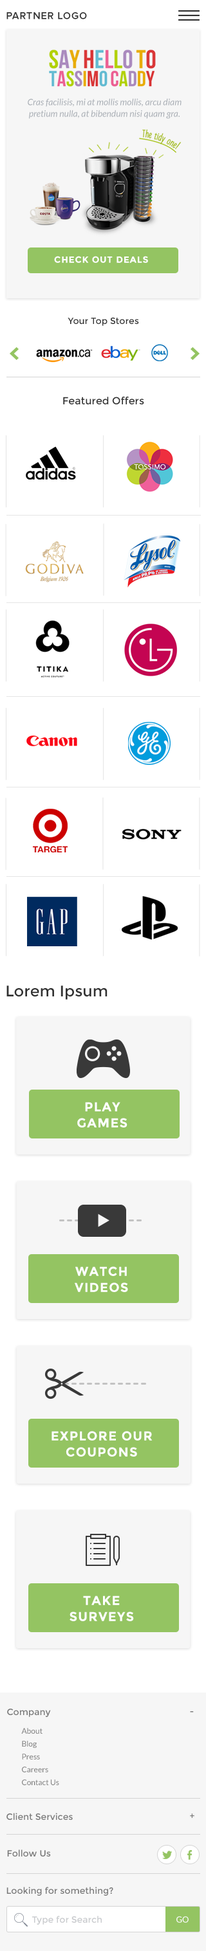
<style>
.page{position:relative;width:206px;height:1951px;background:#ffffff}
.page>*{position:absolute;margin:0}
.t1{font:10.3px "ProximaNova-Semibold";letter-spacing:0.05em;color:#313131;text-transform:uppercase}
.t2{font:9px/11.6px "Lato-Italic";color:#a9aeb5}
.t3{font:9px "Montserrat-Bold";letter-spacing:0.06em;color:#ffffff;text-transform:uppercase}
.t4{font:9px "Montserrat-Regular";color:#313131}
.t5{font:10.3px "Montserrat-Regular";color:#313131}
.t6{font:15.4px "Montserrat-Regular";color:#313131}
.t7{font:12.8px/16.1px "Montserrat-Bold";letter-spacing:0.06em;color:#ffffff;text-transform:uppercase}
.t8{font:9px "Montserrat-Regular";color:#797979}
.t9{font:7.7px/12.9px "Lato-Regular";color:#797979}
.t10{font:7.7px/16.1px "Lato-Regular";color:#797979}
.t11{font:9px "Montserrat-Regular";color:#c9cbce}
.t12{font:8.4px "Lato-Regular";color:#ffffff}
</style>
<div class="page">
<p class="t1" style="left:6px;top:12px;width:81px;height:7px">PARTNER LOGO</p>
<p class="t2" style="left:28px;top:98px;width:153px;height:21px;text-align:center">Cras facilisis, mi at mollis mollis, arcu diam<br>pretium nulla, at bibendum nisi quam gra.</p>
<p class="t3" style="left:54px;top:256px;width:94px;height:7px">Check Out Deals</p>
<p class="t4" style="left:68px;top:318px;width:71px;height:8px">Your Top Stores</p>
<p class="t5" style="left:63px;top:397px;width:81px;height:8px">Featured Offers</p>
<p class="t6" style="left:6px;top:986px;width:101px;height:14px">Lorem Ipsum</p>
<p class="t7" style="left:77px;top:1102px;width:50px;height:26px;text-align:center">Play<br>games</p>
<p class="t7" style="left:75px;top:1266px;width:53px;height:26px;text-align:center">watch<br>videos</p>
<p class="t7" style="left:51px;top:1431px;width:101px;height:26px;text-align:center">Explore our<br>coupons</p>
<p class="t7" style="left:69px;top:1596px;width:65px;height:25px;text-align:center">take<br>surveys</p>
<p class="t8" style="left:7px;top:1709px;width:44px;height:8px">Company</p>
<p class="t8" style="left:190px;top:1711px;width:4px;height:2px">-</p>
<p class="t9" style="left:21px;top:1728px;width:38px;height:57px"><span class="t10">About<br></span>Blog<br>Press<br>Careers<br>Contact Us</p>
<p class="t8" style="left:6px;top:1813px;width:67px;height:7px">Client Services</p>
<p class="t8" style="left:190px;top:1814px;width:4px;height:4px">+</p>
<p class="t8" style="left:7px;top:1850px;width:44px;height:7px">Follow Us</p>
<p class="t8" style="left:6px;top:1887px;width:107px;height:9px">Looking for something?</p>
<p class="t11" style="left:32px;top:1916px;width:70px;height:9px">Type for Search</p>
<p class="t12" style="left:176px;top:1916px;width:12px;height:7px">GO</p>
</div>
